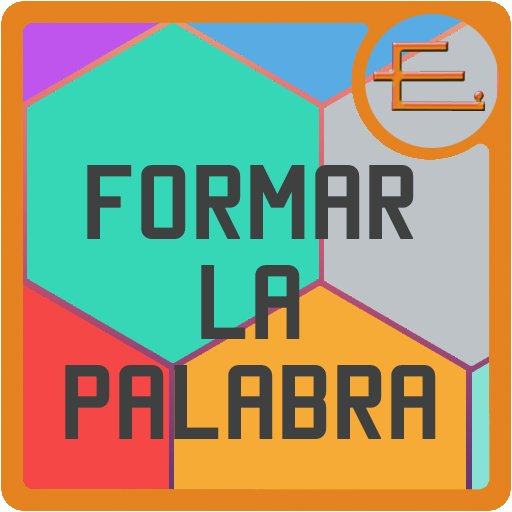
<style>
.page{position:relative;width:512px;height:512px;background:#36d7b7}
.page>*{position:absolute;margin:0}
.t1{font:83.3px "Manteka";color:#3f4040;font-weight:bold}
</style>
<div class="page">
<p class="t1" style="left:65px;top:165px;width:371px;height:274px;text-align:center">FORMAR<br>LA<br>PALABRA</p>
</div>
